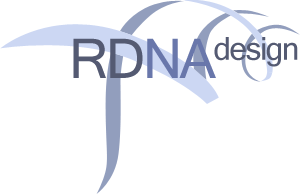
<style>
.page{position:relative;width:300px;height:194px;background:#ffffff}
.page>*{position:absolute;margin:0}
.t1{font:54.7px "MicrosoftSansSerif";letter-spacing:-0.05em;color:#545a72}
.t2{font:54.7px "MicrosoftSansSerif";letter-spacing:-0.05em;color:#6977ab}
</style>
<div class="page">
<p class="t1" style="left:73px;top:37px;width:225px;height:41px">RD<span class="t2">NA</span>design</p>
</div>
